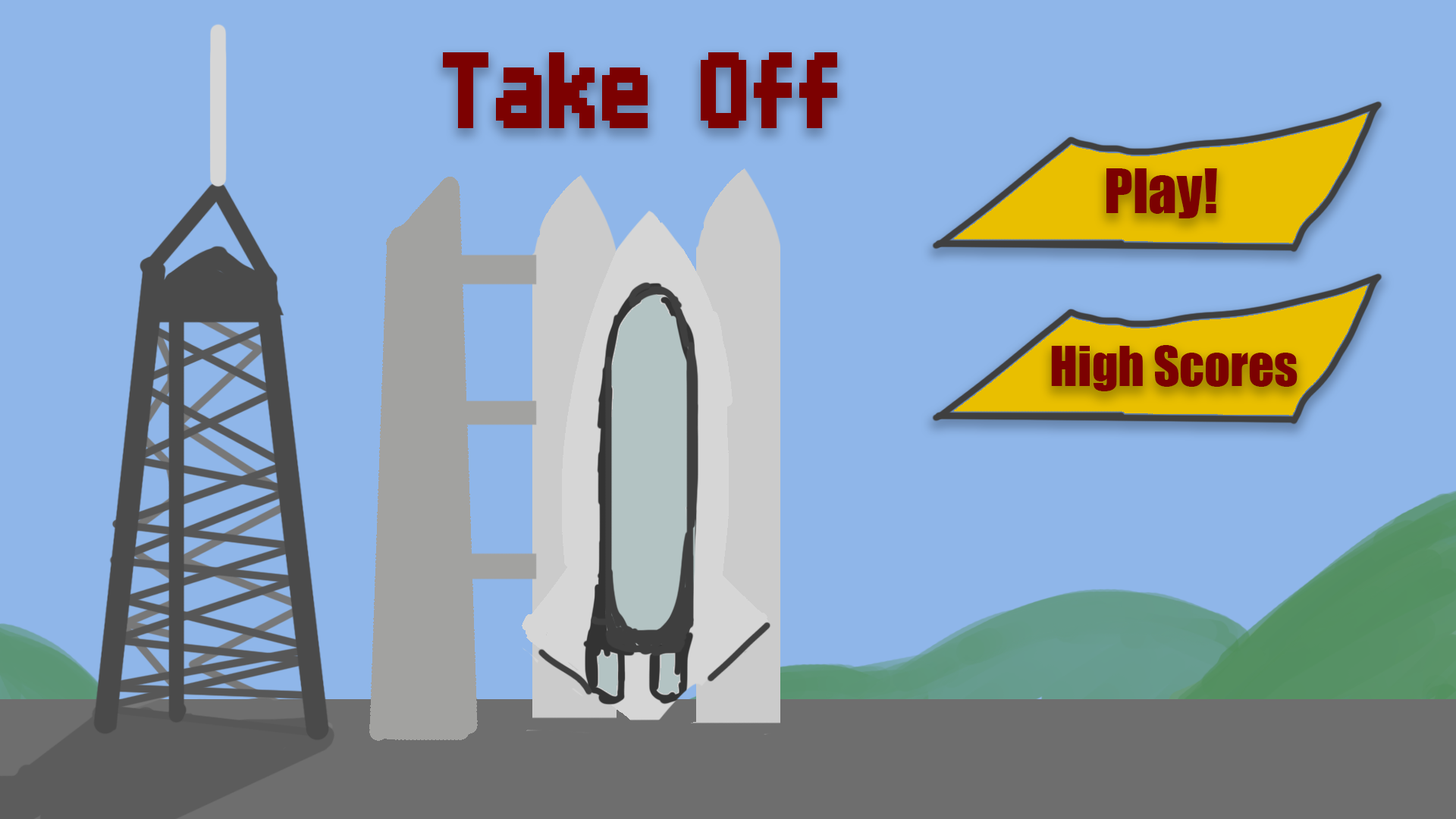
<style>
.page{position:relative;width:1456px;height:819px;background:#8fb6e9}
.page>*{position:absolute;margin:0}
.t1{font:151.7px "MiniPixel-7";color:#7c0101}
.t2{font:56.9px "Impact";color:#7c0101}
.t3{font:50.6px "Impact";color:#7c0101}
</style>
<div class="page">
<p class="t1" style="left:443px;top:52px;width:394px;height:76px">Take Off</p>
<p class="t2" style="left:1106px;top:168px;width:111px;height:50px">Play!</p>
<p class="t3" style="left:1051px;top:345px;width:246px;height:46px">High Scores</p>
</div>
